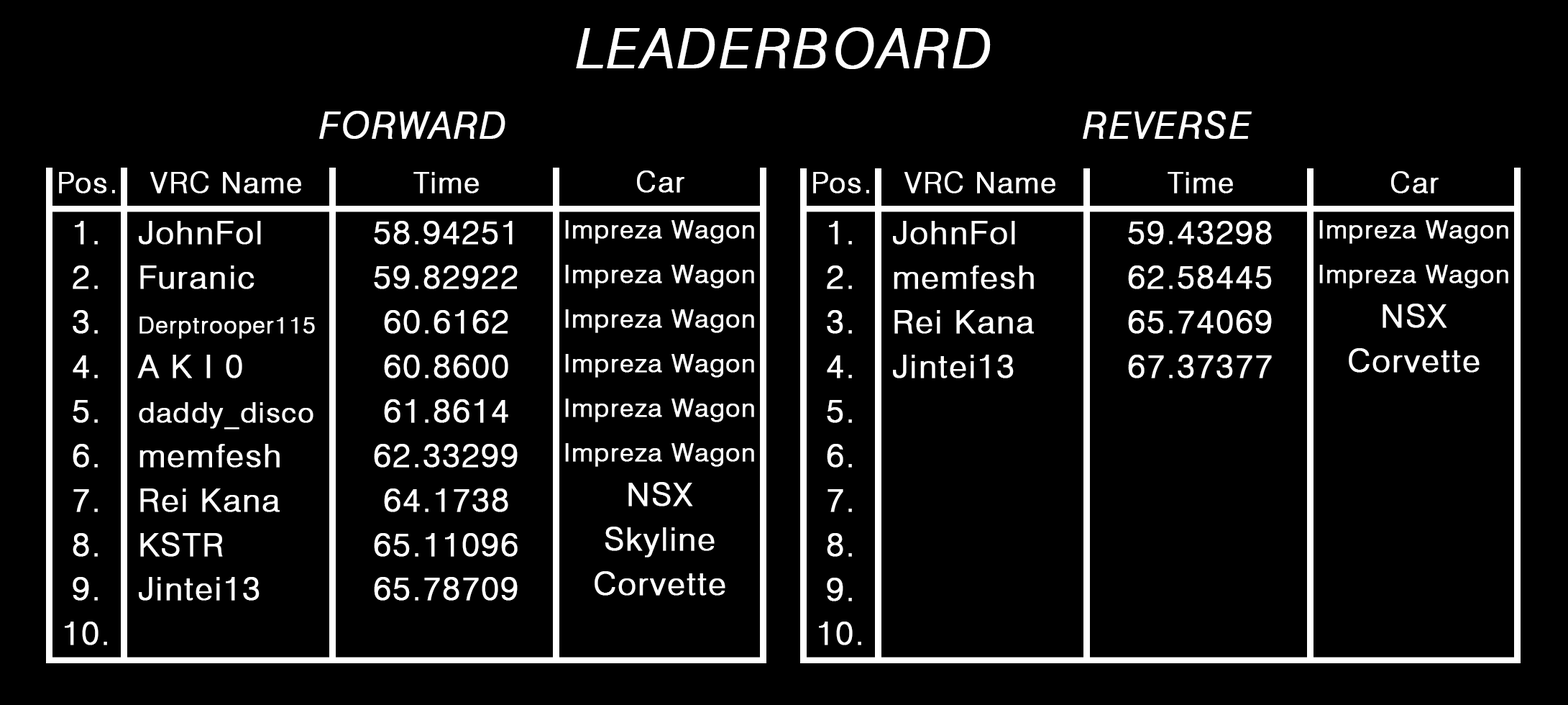
<style>
.page{position:relative;width:1568px;height:705px;background:#000000}
.page>*{position:absolute;margin:0}
.t1{font:55.4px "Swiss721BT-LightItalic";letter-spacing:0.04em;color:#ffffff;font-weight:bold}
.t2{font:37.4px "Swiss721BT-LightItalic";letter-spacing:0.04em;color:#ffffff;font-weight:bold}
.t3{font:28.7px "Swiss721BT-Light";letter-spacing:0.04em;color:#ffffff;font-weight:bold}
.t4{font:28.8px "Swiss721BT-Light";letter-spacing:0.04em;color:#ffffff;font-weight:bold}
.t5{font:32.3px/44.6px "Swiss721BT-Light";letter-spacing:0.04em;color:#ffffff;font-weight:bold}
.t6{font:23px/44.6px "Swiss721BT-Light";letter-spacing:0.04em;color:#ffffff;font-weight:bold}
.t7{font:28px/44.6px "Swiss721BT-Light";letter-spacing:0.04em;color:#ffffff;font-weight:bold}
.t8{font:25.2px/44.6px "Swiss721BT-Light";letter-spacing:0.04em;color:#ffffff;font-weight:bold}
.t9{font:32.4px/44.6px "Swiss721BT-Light";letter-spacing:0.04em;color:#ffffff;font-weight:bold}
.t10{font:32.3px/44.5px "Swiss721BT-Light";letter-spacing:0.04em;color:#ffffff;font-weight:bold}
.t11{font:25.1px/44.6px "Swiss721BT-Light";letter-spacing:0.04em;color:#ffffff;font-weight:bold}
</style>
<div class="page">
<p class="t1" style="left:576px;top:27px;width:415px;height:42px">LEADERBOARD</p>
<p class="t2" style="left:319px;top:111px;width:186px;height:28px">FORWARD</p>
<p class="t2" style="left:1083px;top:111px;width:169px;height:28px">REVERSE</p>
<p class="t3" style="left:59px;top:172px;width:56px;height:21px">Pos.</p>
<p class="t3" style="left:150px;top:171px;width:151px;height:22px">VRC Name</p>
<p class="t3" style="left:413px;top:172px;width:66px;height:21px">Time</p>
<p class="t4" style="left:637px;top:170px;width:47px;height:23px">Car</p>
<p class="t3" style="left:813px;top:172px;width:56px;height:21px">Pos.</p>
<p class="t3" style="left:904px;top:171px;width:151px;height:22px">VRC Name</p>
<p class="t3" style="left:1168px;top:172px;width:65px;height:21px">Time</p>
<p class="t3" style="left:1391px;top:171px;width:48px;height:22px">Car</p>
<p class="t5" style="left:65px;top:221px;width:42px;height:424px;text-align:center">1.<br>2.<br>3.<br>4.<br>5.<br>6.<br>7.<br>8.<br>9.<br>10.</p>
<p class="t5" style="left:137px;top:221px;width:178px;height:379px">JohnFol<br>Furanic<br><span class="t6">Derptrooper115<br></span>A K I 0<br><span class="t7">daddy_disco<br></span>memfesh<br>Rei Kana<br>KSTR<br>Jintei13</p>
<p class="t5" style="left:374px;top:221px;width:144px;height:379px;text-align:center">58.94251<br>59.82922<br>60.6162<br>60.8600<br>61.8614<br>62.33299<br>64.1738<br>65.11096<br>65.78709</p>
<p class="t8" style="left:565px;top:220px;width:189px;height:375px;text-align:center">Impreza Wagon<br>Impreza Wagon<br>Impreza Wagon<br>Impreza Wagon<br>Impreza Wagon<br>Impreza Wagon<br><span class="t9">NSX<br>Skyline<br>Corvette</span></p>
<p class="t10" style="left:819px;top:221px;width:42px;height:424px;text-align:center">1.<br>2.<br>3.<br>4.<br>5.<br>6.<br>7.<br>8.<br>9.<br>10.</p>
<p class="t10" style="left:893px;top:221px;width:141px;height:157px">JohnFol<br>memfesh<br>Rei Kana<br>Jintei13</p>
<p class="t10" style="left:1128px;top:221px;width:144px;height:157px;text-align:center">59.43298<br>62.58445<br>65.74069<br>67.37377</p>
<p class="t11" style="left:1319px;top:220px;width:189px;height:152px;text-align:center">Impreza Wagon<br>Impreza Wagon<br><span class="t5">NSX<br>Corvette</span></p>
</div>
